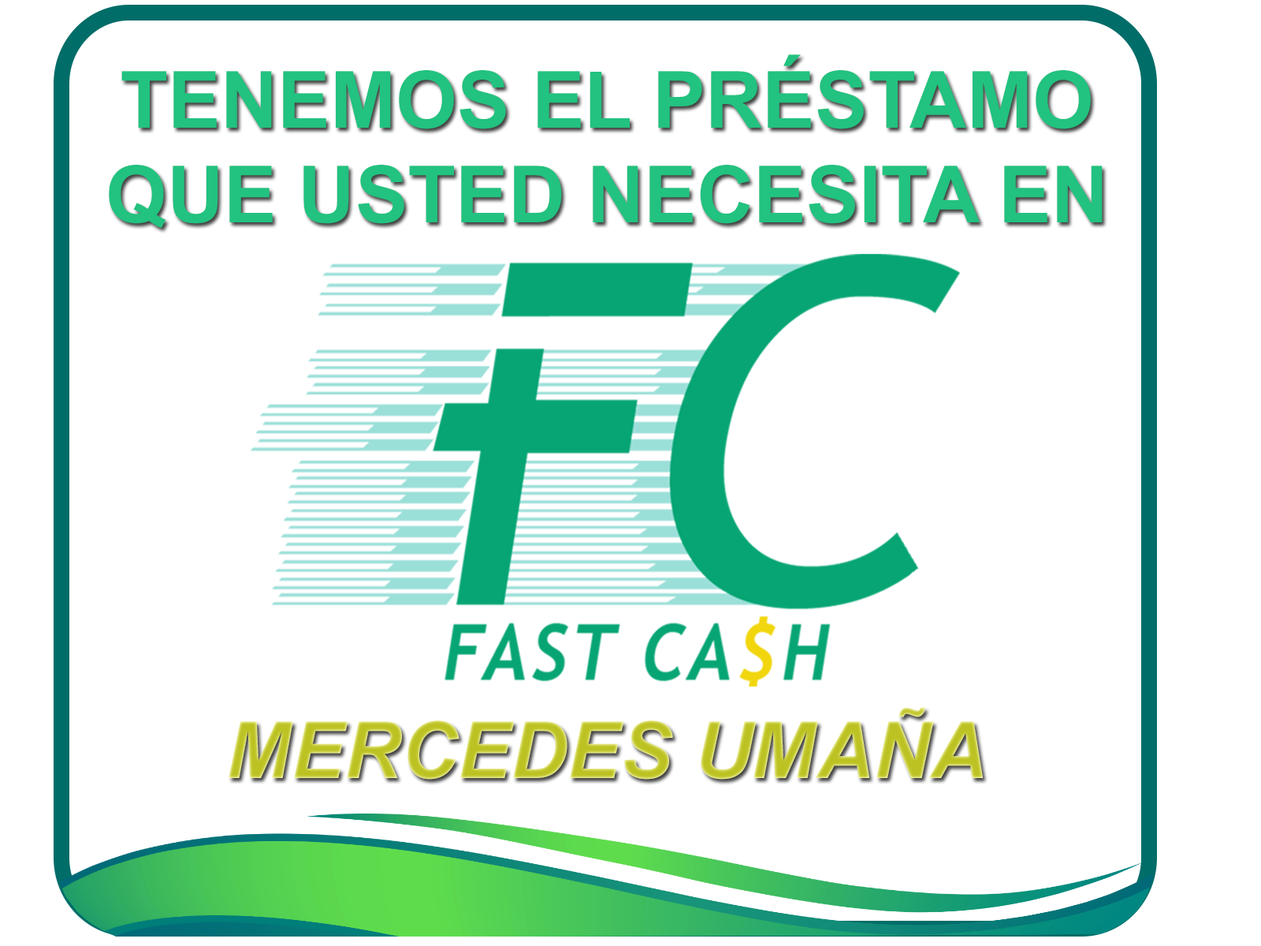
<style>
.page{position:relative;width:1261px;height:946px;background:#ffffff}
.page>*{position:absolute;margin:0}
.t1{font:78.8px "Arial-BoldMT";color:#22c280}
.t2{font:78.8px "Arial-BoldItalicMT";color:#bcc222}
</style>
<div class="page">
<p class="t1" style="left:109px;top:54px;width:994px;height:174px;text-align:center">TENEMOS EL PRÉSTAMO<br>QUE USTED NECESITA EN</p>
<p class="t2" style="left:229px;top:707px;width:754px;height:72px">MERCEDES UMAÑA</p>
</div>
